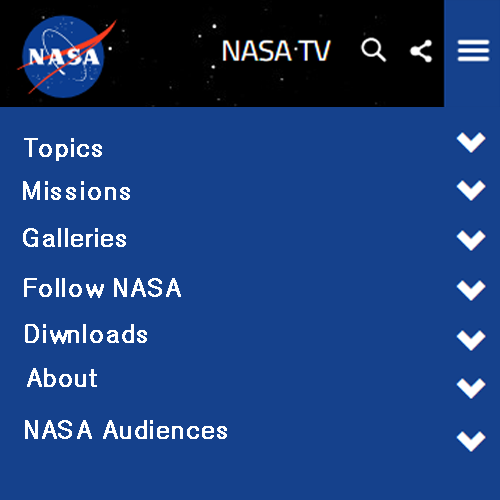
<style>
.page{position:relative;width:500px;height:500px;background:#15418c}
.page>*{position:absolute;margin:0}
.t1{font:24.2px "Gulim";color:#ffffff;font-weight:bold}
</style>
<div class="page">
<p class="t1" style="left:24px;top:138px;width:78px;height:23px">Topics</p>
<p class="t1" style="left:23px;top:181px;width:107px;height:19px">Missions</p>
<p class="t1" style="left:23px;top:228px;width:103px;height:19px">Galleries</p>
<p class="t1" style="left:24px;top:278px;width:157px;height:20px">Follow NASA</p>
<p class="t1" style="left:25px;top:324px;width:122px;height:20px">Diwnloads</p>
<p class="t1" style="left:27px;top:368px;width:70px;height:19px">About</p>
<p class="t1" style="left:25px;top:420px;width:202px;height:19px">NASA Audiences</p>
</div>
